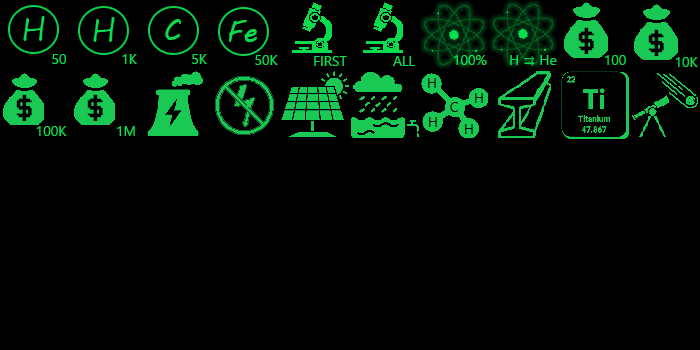
<style>
.page{position:relative;width:700px;height:350px;background:#000000}
.page>*{position:absolute;margin:0}
.t1{font:30px "MVBoli";color:#07dd4d}
.t2{font:30px "Terminal";color:#000000}
.t3{font:14px "SegoeUISymbol";color:#07dd4d}
.t4{font:14px "SegoeUISymbol";color:#000000}
</style>
<div class="page">
<p class="t1" style="left:165px;top:19px;width:16px;height:21px">C</p>
<p class="t1" style="left:229px;top:20px;width:28px;height:22px">Fe</p>
<p class="t2" style="left:578px;top:27px;width:16px;height:27px">$</p>
<p class="t2" style="left:648px;top:29px;width:16px;height:27px">$</p>
<p class="t3" style="left:52px;top:54px;width:14px;height:10px">50</p>
<p class="t3" style="left:122px;top:54px;width:15px;height:10px">1K</p>
<p class="t3" style="left:192px;top:54px;width:15px;height:10px">5K</p>
<p class="t3" style="left:255px;top:55px;width:23px;height:10px">50K</p>
<p class="t3" style="left:314px;top:56px;width:33px;height:10px">FIRST</p>
<p class="t3" style="left:393px;top:56px;width:22px;height:10px">ALL</p>
<p class="t3" style="left:454px;top:55px;width:33px;height:10px">100%</p>
<p class="t3" style="left:510px;top:55px;width:47px;height:11px">H ⇉ He</p>
<p class="t3" style="left:605px;top:55px;width:21px;height:10px">100</p>
<p class="t3" style="left:675px;top:57px;width:23px;height:10px">10K</p>
<p class="t4" style="left:428px;top:78px;width:8px;height:10px">H</p>
<p class="t2" style="left:16px;top:94px;width:16px;height:27px">$</p>
<p class="t2" style="left:87px;top:94px;width:16px;height:27px">$</p>
<p class="t4" style="left:450px;top:102px;width:8px;height:10px">C</p>
<p class="t4" style="left:475px;top:93px;width:8px;height:10px">H</p>
<p class="t3" style="left:36px;top:126px;width:31px;height:10px">100K</p>
<p class="t3" style="left:117px;top:126px;width:18px;height:10px">1M</p>
<p class="t4" style="left:429px;top:117px;width:8px;height:10px">H</p>
<p class="t4" style="left:465px;top:124px;width:8px;height:10px">H</p>
</div>
